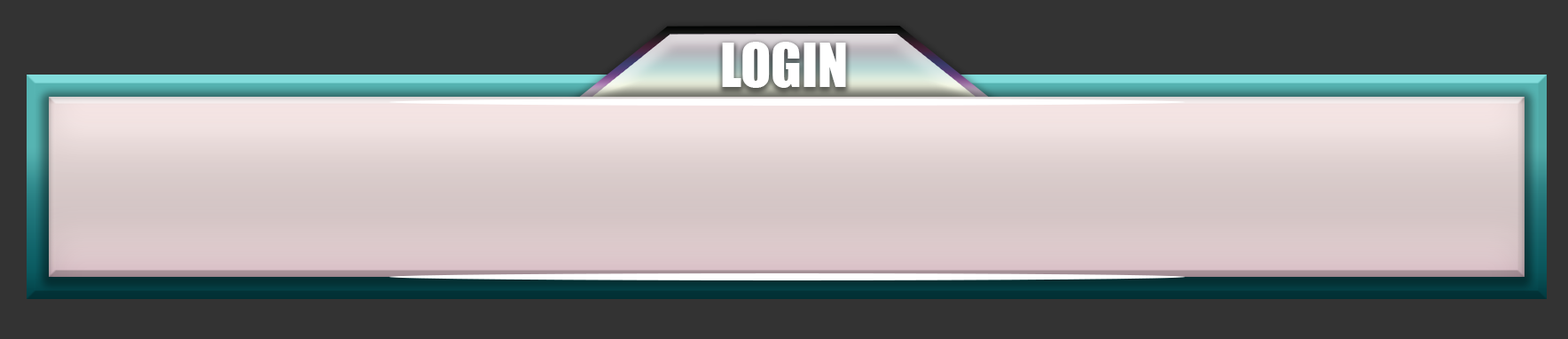
<style>
.page{position:relative;width:1568px;height:339px;background:#333333}
.page>*{position:absolute;margin:0}
.t1{font:55.4px "Impact";color:#ffffff}
</style>
<div class="page">
<p class="t1" style="left:722px;top:42px;width:124px;height:46px">LOGIN</p>
</div>
